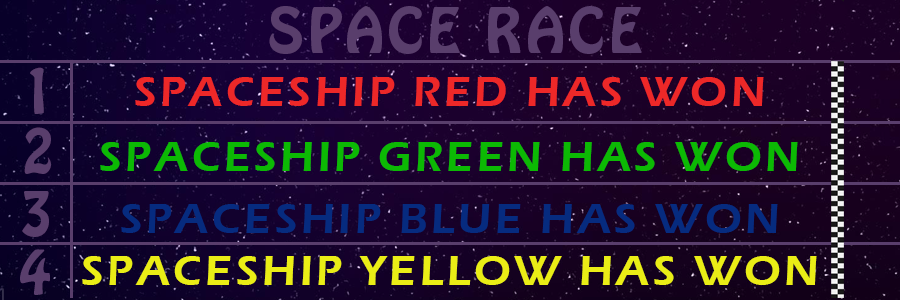
<style>
.page{position:relative;width:900px;height:300px}
.page>*{position:absolute;margin:0}
.t1{font:44px "ErasITC-Demi";letter-spacing:0.08em;color:#ed2828;text-transform:uppercase}
.t2{font:44px "ErasITC-Demi";letter-spacing:0.08em;color:#0cb904;text-transform:uppercase}
.t3{font:43.7px "ErasITC-Demi";letter-spacing:0.08em;color:#062b7f;text-transform:uppercase}
.t4{font:43.7px "ErasITC-Demi";letter-spacing:0.08em;color:#eaed16;text-transform:uppercase}
</style>
<div class="page">
<p class="t1" style="left:135px;top:77px;width:629px;height:29px">SPACESHIP RED HAs WON</p>
<p class="t2" style="left:100px;top:142px;width:698px;height:29px">SPACESHIP green HAs WON</p>
<p class="t3" style="left:121px;top:204px;width:657px;height:29px">SPACESHIP BLue HAs WON</p>
<p class="t4" style="left:82px;top:256px;width:735px;height:29px">SPACESHIP Yellow HAs WON</p>
</div>
